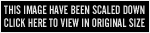
<style>
.page{position:relative;width:150px;height:33px;background:#000000}
.page>*{position:absolute;margin:0}
.t1{font:12px "AlternateGothicNo2BT-Regular";color:#e5e5e5;text-transform:uppercase}
.t2{font:11.9px "AlternateGothicNo2BT-Regular";letter-spacing:0.001em;color:#e5e5e5;text-transform:uppercase}
</style>
<div class="page">
<p class="t1" style="left:4px;top:5px;width:141px;height:9px">this image have been scaled down</p>
<p class="t2" style="left:4px;top:18px;width:141px;height:9px">click here to view in original size</p>
</div>
